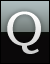
<style>
.page{position:relative;width:50px;height:64px;background:#0a0809}
.page>*{position:absolute;margin:0}
.t1{font:48px "BookmanOldStyle";color:#e7e7e7;font-weight:bold}
</style>
<div class="page">
<p class="t1" style="left:7px;top:11px;width:34px;height:43px">Q</p>
</div>
